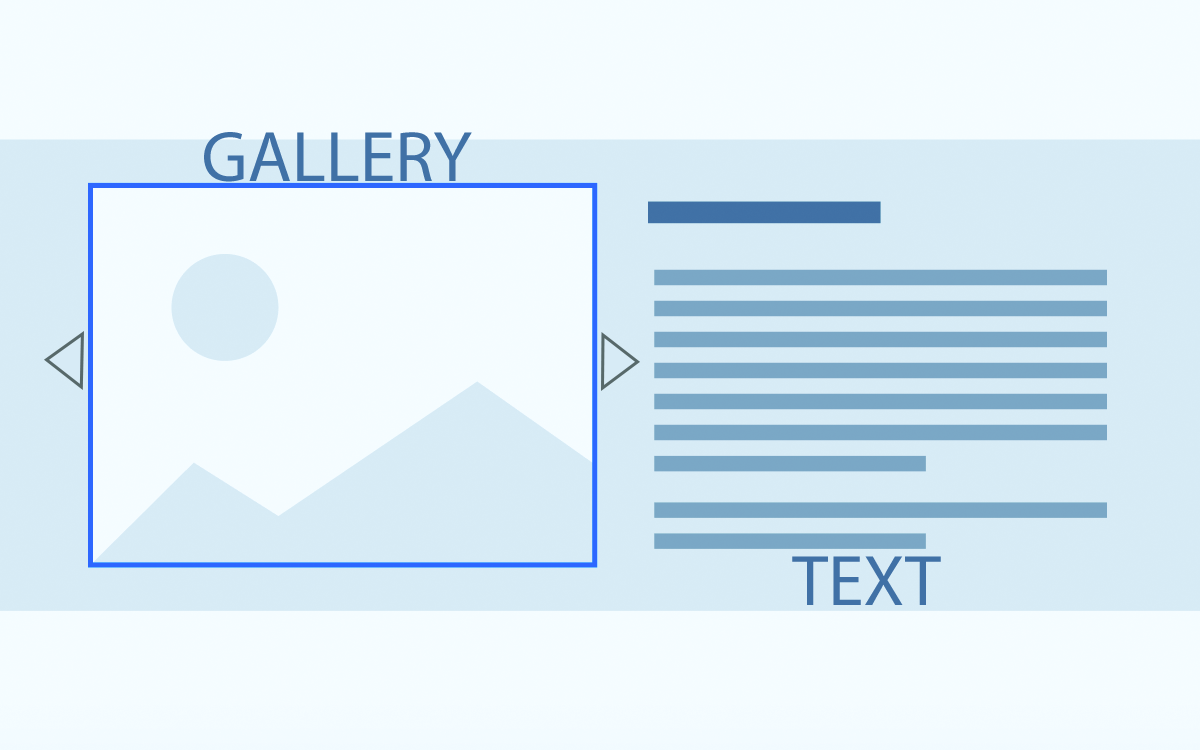
<style>
.page{position:relative;width:1200px;height:750px;background:#f4fcff}
.page>*{position:absolute;margin:0}
.t1{font:72px "MyriadPro-Regular";color:#4071a6}
</style>
<div class="page">
<p class="t1" style="left:204px;top:132px;width:268px;height:50px">GALLERY</p>
<p class="t1" style="left:792px;top:556px;width:149px;height:49px">TEXT</p>
</div>
